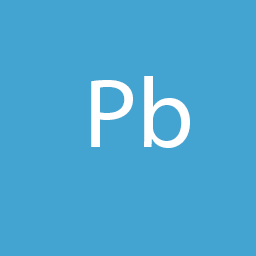
<style>
.page{position:relative;width:256px;height:256px;background:#44a4d1}
.page>*{position:absolute;margin:0}
.t1{font:100px "MyriadPro-Regular";color:#ffffff}
</style>
<div class="page">
<p class="t1" style="left:91px;top:76px;width:99px;height:72px">Pb</p>
</div>
